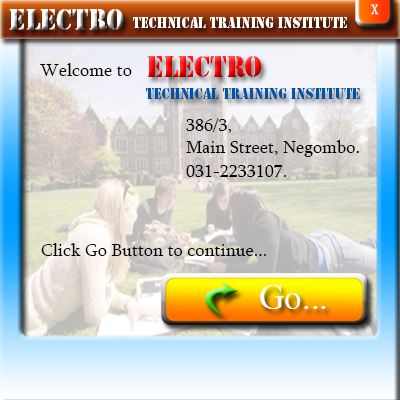
<style>
.page{position:relative;width:400px;height:400px}
.page>*{position:absolute;margin:0}
.t1{font:13.7px "Sylfaen";color:#ffffff;scale:0.77 1}
.t2{font:26.9px "StencilStd";scale:0.91 1}
.t3{font:13.4px "StencilStd";color:#ffffff;scale:0.91 1}
.t4{font:18px "Sylfaen";color:#000000}
.t5{font:13.4px "StencilStd";color:#0054a6;scale:0.91 1}
.t6{font:35px "TimesNewRomanPSMT";color:#ffffff}
</style>
<div class="page">
<p class="t1" style="left:371px;top:4px;width:8px;height:11px">X</p>
<p class="t2" style="left:9px;top:9px;width:115px;height:21px">Electro</p>
<p class="t3" style="left:133px;top:17px;width:214px;height:11px">Technical Training Institute</p>
<p class="t4" style="left:40px;top:63px;width:92px;height:13px">Welcome to</p>
<p class="t2" style="left:147px;top:56px;width:115px;height:21px">Electro</p>
<p class="t5" style="left:146px;top:88px;width:214px;height:11px">Technical Training Institute</p>
<p class="t4" style="left:186px;top:118px;width:173px;height:39px">386/3,<br>Main Street, Negombo.</p>
<p class="t4" style="left:186px;top:165px;width:100px;height:12px">031-2233107.</p>
<p class="t4" style="left:41px;top:243px;width:225px;height:13px">Click Go Button to continue...</p>
<p class="t6" style="left:260px;top:285px;width:66px;height:24px">Go...</p>
</div>
